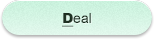
<style>
.page{position:relative;width:154px;height:39px}
.page>*{position:absolute;margin:0}
.t1{font:14px "ArialMT";color:#213525}
.t2{font:14px "Arial-Black";color:#213525;text-decoration:underline}
</style>
<div class="page">
<p class="t1" style="left:62px;top:13px;width:29px;height:14px"><span class="t2">D</span>eal</p>
</div>
